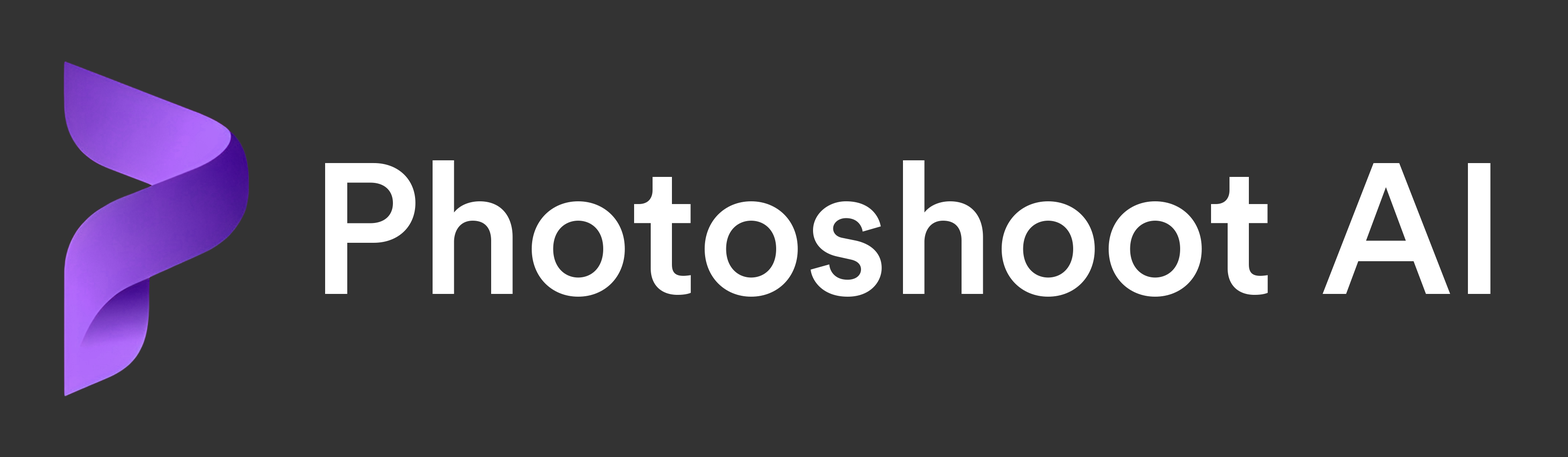
<style>
.page{position:relative;width:1568px;height:457px;background:#333333}
.page>*{position:absolute;margin:0}
.t1{font:184.5px "CircularStd-Medium";color:#ffffff}
</style>
<div class="page">
<p class="t1" style="left:325px;top:160px;width:1166px;height:137px">Photoshoot AI</p>
</div>
